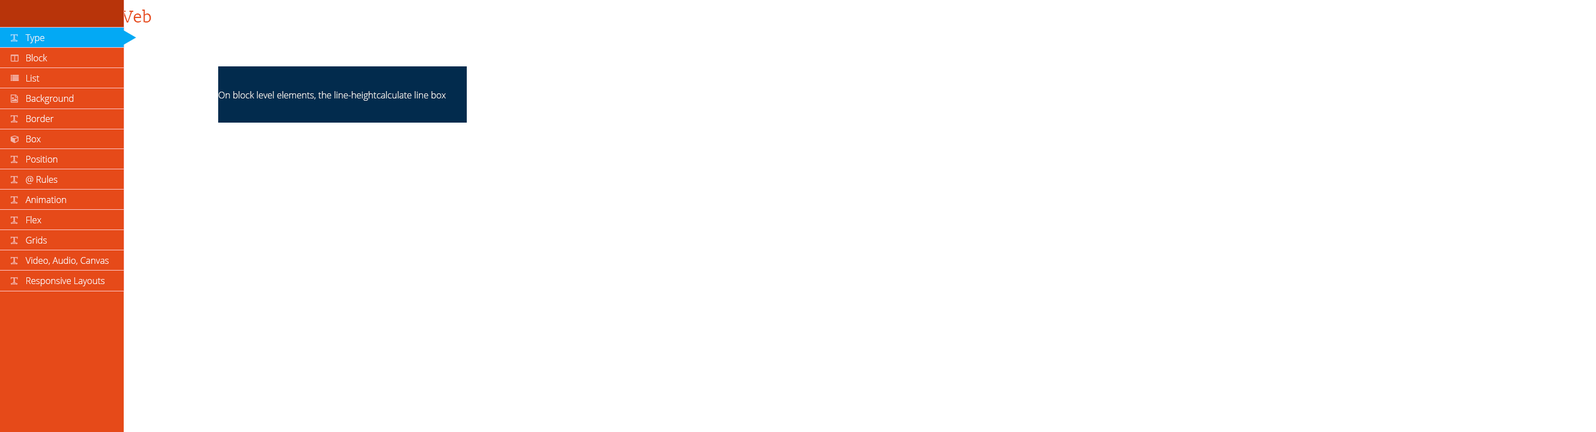
<style>
.page{position:relative;width:1596px;height:432px;background:#ffffff}
.page>*{position:absolute;margin:0}
.t1{font:9px/20.2px "OpenSans-Light";color:#fcfbf7}
.t2{font:9px "OpenSans-Light";color:#fcfbf7}
</style>
<div class="page">
<p class="t1" style="left:25px;top:34px;width:84px;height:252px">Type<br>Block<br>List<br>Background<br>Border<br>Box<br>Position<br>@ Rules<br>Animation<br>Flex<br>Grids<br>Video, Audio, Canvas<br>Responsive Layouts</p>
<p class="t2" style="left:218px;top:91px;width:228px;height:10px">On block level elements, the line-heightcalculate line box</p>
</div>
